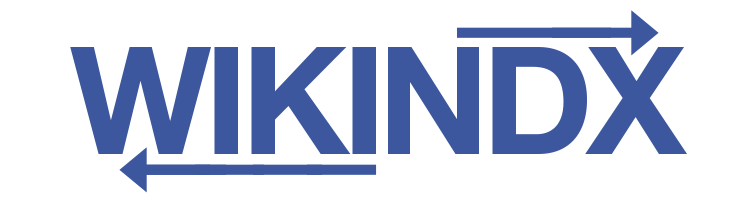
<style>
.page{position:relative;width:754px;height:204px;background:#ffffff}
.page>*{position:absolute;margin:0}
.t1{font:150px "HelveticaNeueLTStd-Bd";letter-spacing:-0.05em;color:#3c579e}
</style>
<div class="page">
<p class="t1" style="left:70px;top:47px;width:617px;height:107px">WIKINDX</p>
</div>
